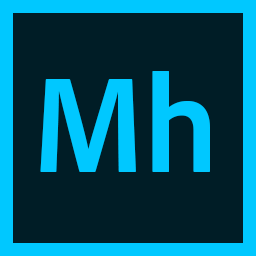
<style>
.page{position:relative;width:256px;height:256px;background:#001d26}
.page>*{position:absolute;margin:0}
.t1{font:142.9px "AdobeClean-BoldSemiCn";color:#00c8ff}
</style>
<div class="page">
<p class="t1" style="left:40px;top:71px;width:170px;height:101px">Mh</p>
</div>
